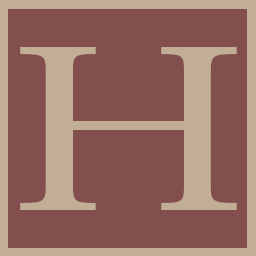
<style>
.page{position:relative;width:256px;height:256px;background:#824e4e}
.page>*{position:absolute;margin:0}
.t1{font:220.2px "AdobeKaitiStd-Regular";color:#c2ae95;scale:1.47 1}
</style>
<div class="page">
<p class="t1" style="left:20px;top:47px;width:217px;height:163px">H</p>
</div>
